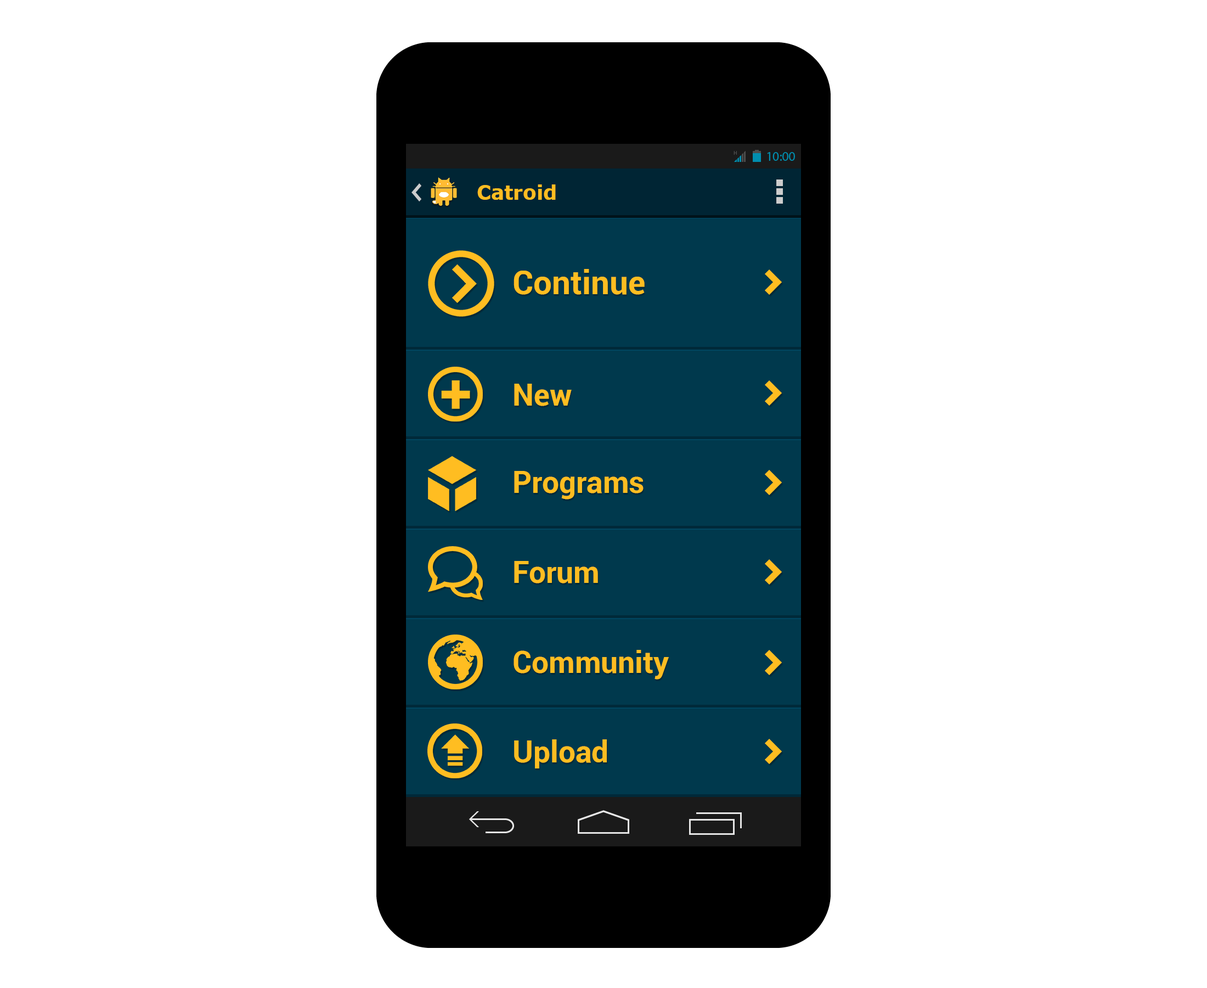
<style>
.page{position:relative;width:1207px;height:988px;background:#ffffff}
.page>*{position:absolute;margin:0}
.t1{font:19.8px "Verdana-Bold";color:#ffbd21}
.t2{font:33.3px "Roboto-Bold";color:#ffbd21}
.t3{font:30.2px "Roboto-Bold";color:#ffbd21}
</style>
<div class="page">
<p class="t1" style="left:477px;top:184px;width:79px;height:16px">Catroid</p>
<p class="t2" style="left:514px;top:269px;width:131px;height:26px">Continue</p>
<p class="t3" style="left:514px;top:384px;width:58px;height:22px">New</p>
<p class="t3" style="left:514px;top:471px;width:130px;height:28px">Programs</p>
<p class="t3" style="left:514px;top:561px;width:84px;height:22px">Forum</p>
<p class="t3" style="left:514px;top:650px;width:155px;height:29px">Community</p>
<p class="t3" style="left:514px;top:739px;width:93px;height:29px">Upload</p>
</div>
